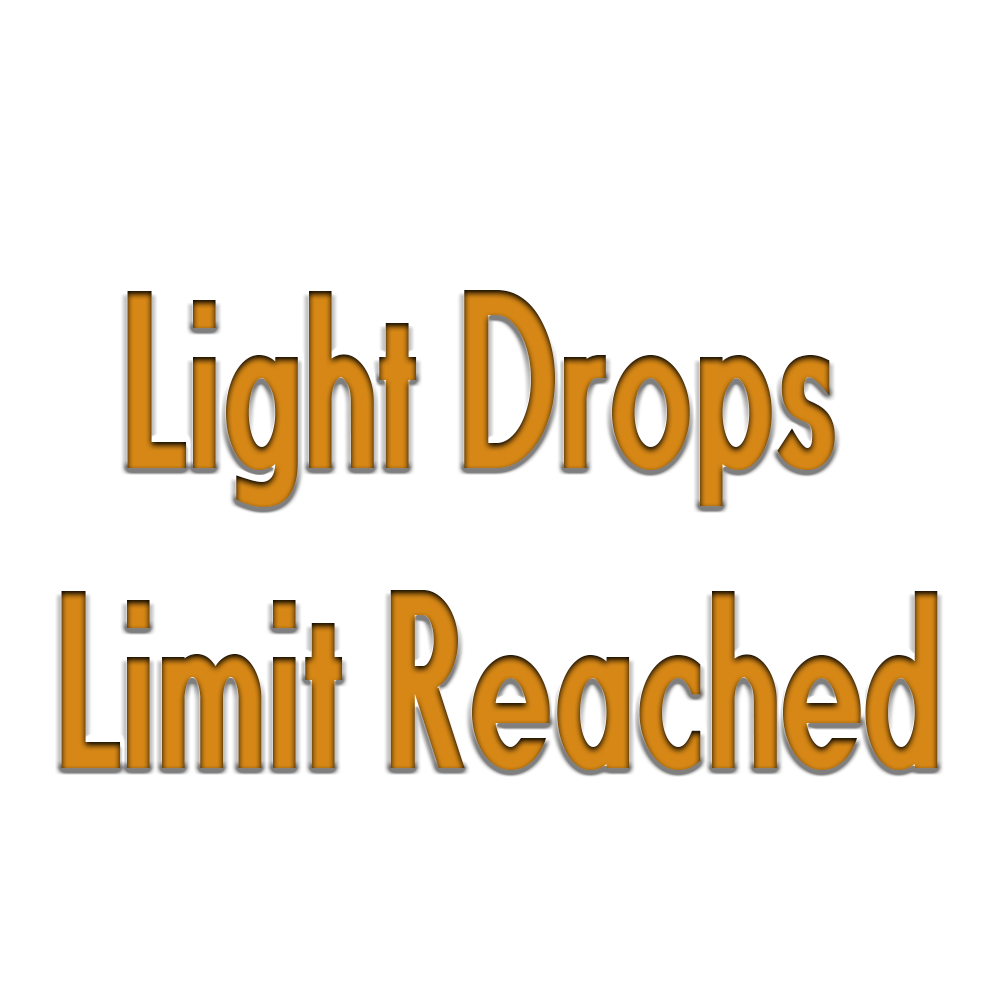
<style>
.page{position:relative;width:1000px;height:1000px;background:#ffffff}
.page>*{position:absolute;margin:0}
.t1{font:250px "FundamentalBrigadeCondensed";color:#d68715}
</style>
<div class="page">
<p class="t1" style="left:61px;top:290px;width:877px;height:480px;text-align:center">Light Drops <br>Limit Reached</p>
</div>
